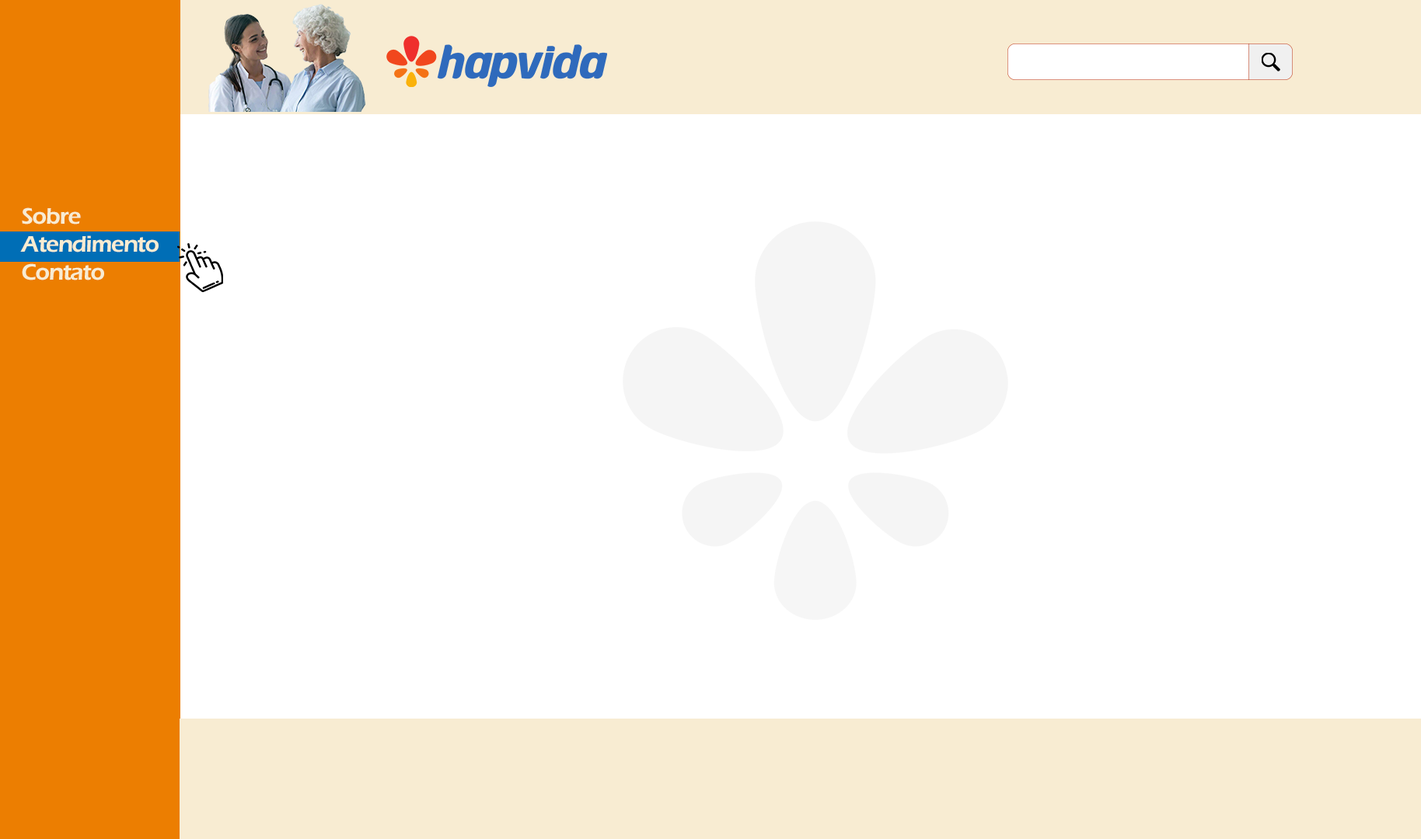
<style>
.page{position:relative;width:1421px;height:839px;background:#ffffff}
.page>*{position:absolute;margin:0}
.t1{font:23.3px/28px "ErasITC-Demi";letter-spacing:-0.04em;color:#f8ecd2}
</style>
<div class="page">
<p class="t1" style="left:20px;top:208px;width:139px;height:73px">Sobre<br>Atendimento<br>Contato</p>
</div>
